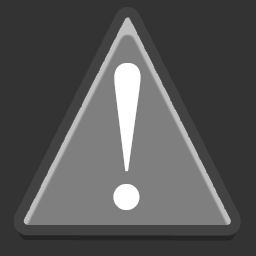
<style>
.page{position:relative;width:256px;height:256px;background:#333333}
.page>*{position:absolute;margin:0}
.t1{font:217.5px "BaskOldFace";letter-spacing:-0.02em;color:#ffffff}
</style>
<div class="page">
<p class="t1" style="left:113px;top:63px;width:28px;height:147px">!</p>
</div>
